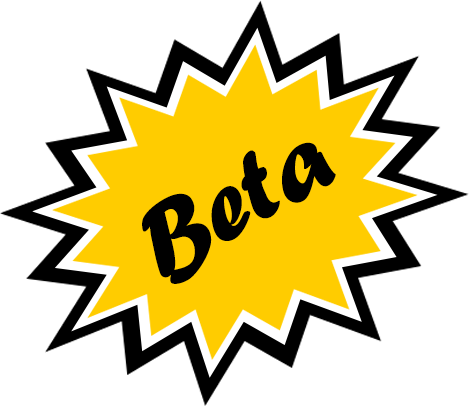
<style>
.page{position:relative;width:469px;height:406px;background:#ffffff}
.page>*{position:absolute;margin:0}
.t1{font:103.3px "ForteMT";color:#000000}
</style>
<div class="page">
<p class="t1" style="left:142px;top:142px;width:194px;height:142px;rotate:-30deg">Beta</p>
</div>
